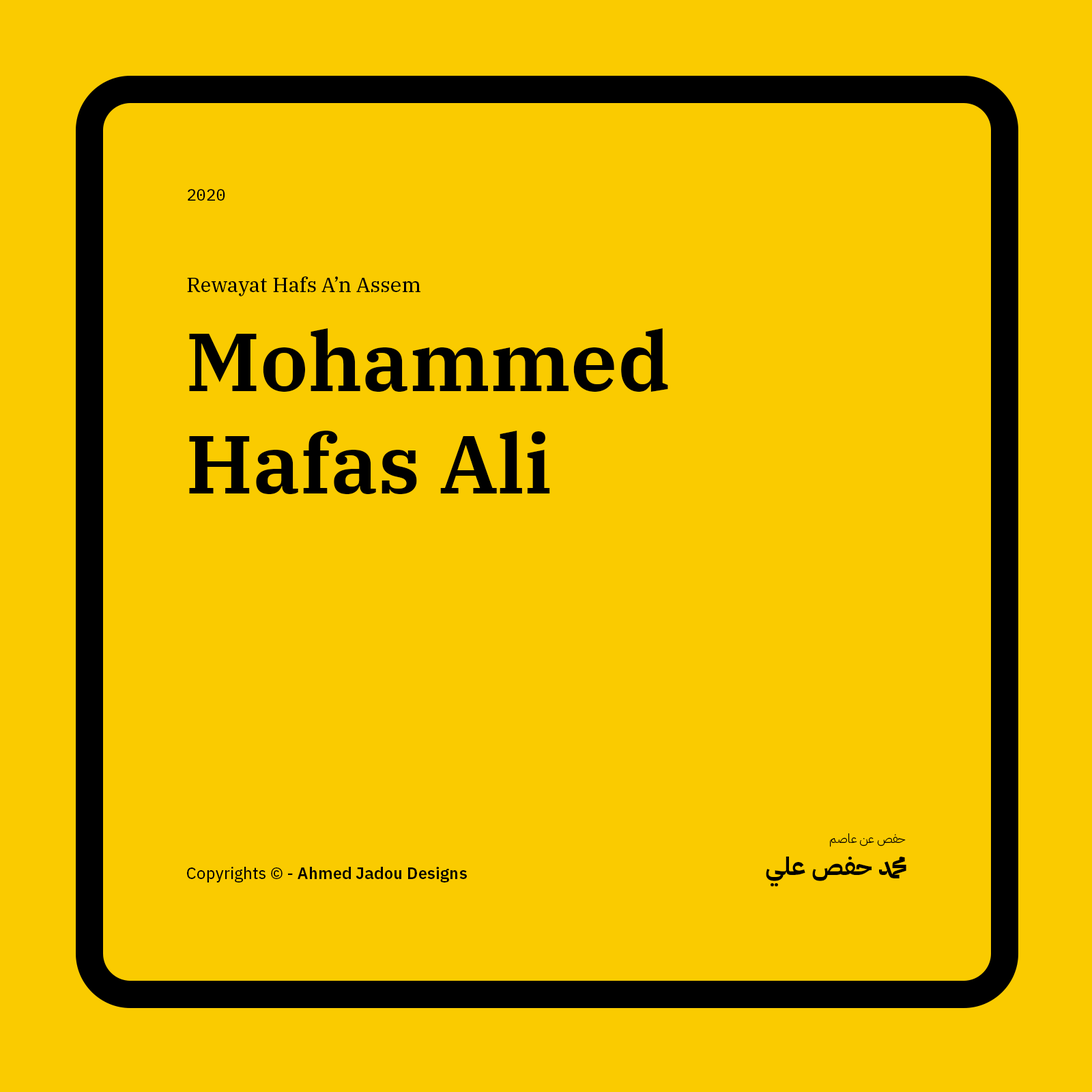
<style>
.page{position:relative;width:1092px;height:1092px;background:#facb00}
.page>*{position:absolute;margin:0}
.t1{font:16.4px "IBMPlexMono-Text";color:#000000}
.t2{font:20.5px "IBMPlexSerif-Text";color:#000000}
.t3{font:81.9px/102.7px "IBMPlexSerif-SemiBold";color:#000000}
.t4{font:12.3px "IBMPlexArabic-Light";color:#000000}
.t5{font:24.6px "IBMPlexArabic-Bold";color:#000000}
.t6{font:16.4px "IBMPlexSans-SemiBold";color:#000000}
.t7{font:16.4px "IBMPlexSans-Text";color:#000000}
</style>
<div class="page">
<p class="t1" style="left:188px;top:189px;width:37px;height:12px">2020</p>
<p class="t2" style="left:187px;top:276px;width:233px;height:20px">Rewayat Hafs A’n Assem</p>
<p class="t3" style="left:189px;top:328px;width:479px;height:166px">Mohammed Hafas Ali</p>
<p class="t4" style="left:830px;top:833px;width:76px;height:14px">حفص عن عاصم</p>
<p class="t5" style="left:766px;top:857px;width:140px;height:30px">محمد حفص علي</p>
<p class="t6" style="left:187px;top:867px;width:280px;height:15px"><span class="t7">Copyrights © - </span>Ahmed Jadou Designs</p>
</div>
